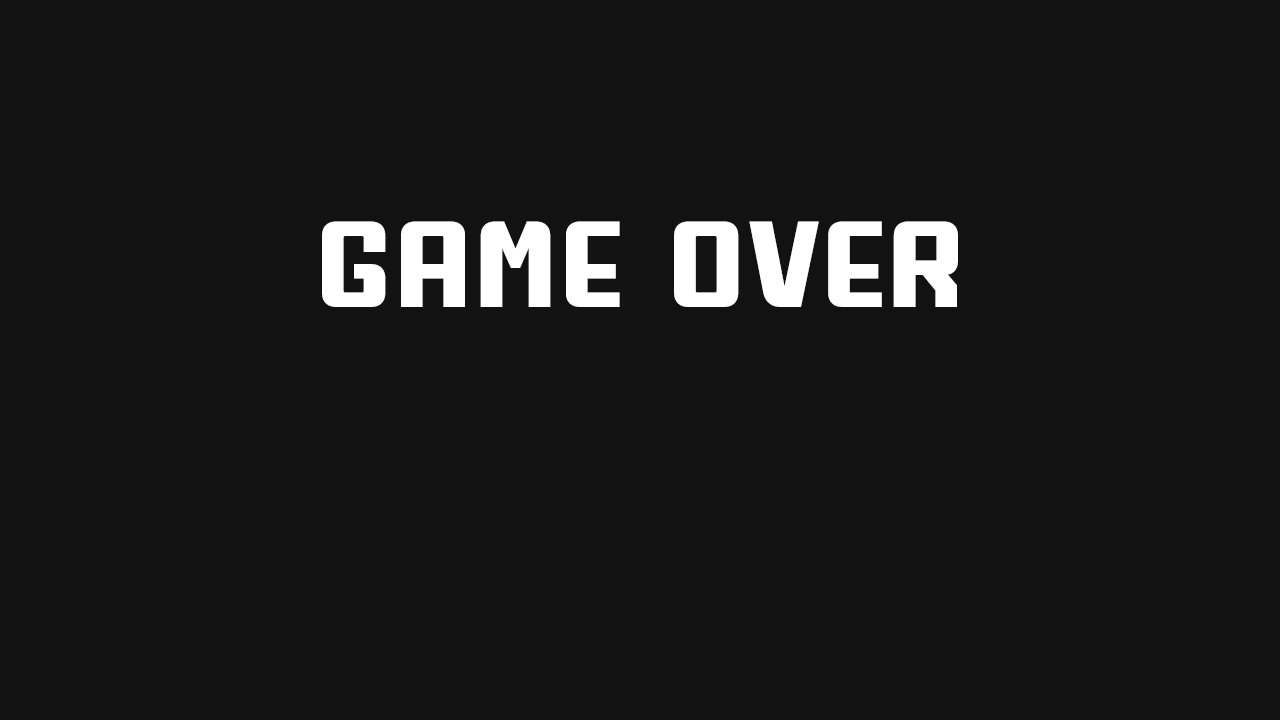
<style>
.page{position:relative;width:1280px;height:720px;background:#121212}
.page>*{position:absolute;margin:0}
.t1{font:177.4px "chuanchiim-Regular";color:#ffffff}
</style>
<div class="page">
<p class="t1" style="left:322px;top:221px;width:636px;height:86px">GAME OVER</p>
</div>
